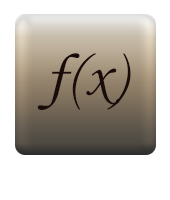
<style>
.page{position:relative;width:170px;height:200px;background:#ffffff}
.page>*{position:absolute;margin:0}
.t1{font:60px "MonotypeCorsiva";letter-spacing:0.03em;color:#190c0a}
</style>
<div class="page">
<p class="t1" style="left:37px;top:53px;width:94px;height:57px">f(x)</p>
</div>
